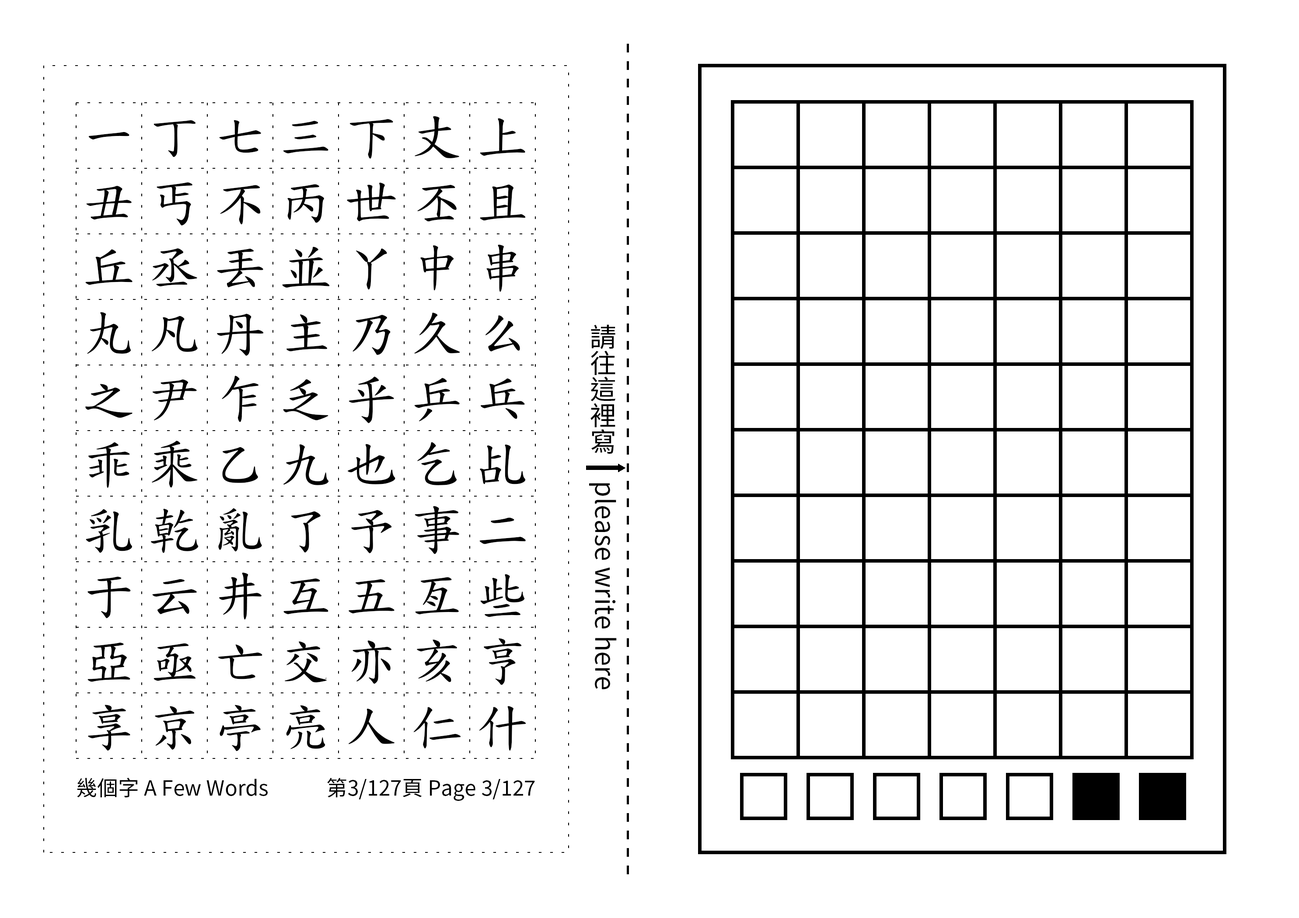
<style>
.page{position:relative;width:1299px;height:918px;background:#ffffff}
.page>*{position:absolute;margin:0}
.t1{font:52.5px/65.6px "TW-Kai-98_1";letter-spacing:0.25em;color:#000000}
.t2{font:26.2px "SourceHanSansTC-Regular";color:#000000}
.t3{font:21px "SourceHanSansTC-Regular";color:#000000}
</style>
<div class="page">
<p class="t1" style="left:85px;top:116px;width:441px;height:636px;text-align:center">一丁七三下丈上丑丐不丙世丕且丘丞丟並丫中串丸凡丹主乃久么之尹乍乏乎乒乓乖乘乙九也乞乩乳乾亂了予事二于云井互五亙些亞亟亡交亦亥亨享京亭亮人仁什</p>
<p class="t2" style="left:589px;top:324px;width:28px;height:366px;text-align:center">請往這裡寫　please write here</p>
<p class="t3" style="left:77px;top:778px;width:191px;height:20px">幾個字 A Few Words</p>
<p class="t3" style="left:327px;top:778px;width:208px;height:23px">第3/127頁 Page 3/127</p>
</div>
